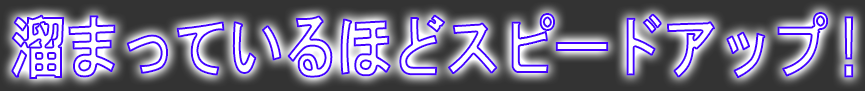
<style>
.page{position:relative;width:865px;height:91px;background:#333333}
.page>*{position:absolute;margin:0}
.t1{font:68.9px "HGSGothicE";letter-spacing:-0.07em;font-weight:bold;scale:0.82 1}
</style>
<div class="page">
<p class="t1" style="left:11px;top:12px;width:843px;height:67px">溜まっているほどスピードアップ !</p>
</div>
